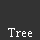
<style>
.page{position:relative;width:40px;height:40px;background:#333333}
.page>*{position:absolute;margin:0}
.t1{font:14px "Sylfaen";color:#ffffff}
</style>
<div class="page">
<p class="t1" style="left:8px;top:28px;width:24px;height:9px">Tree</p>
</div>
